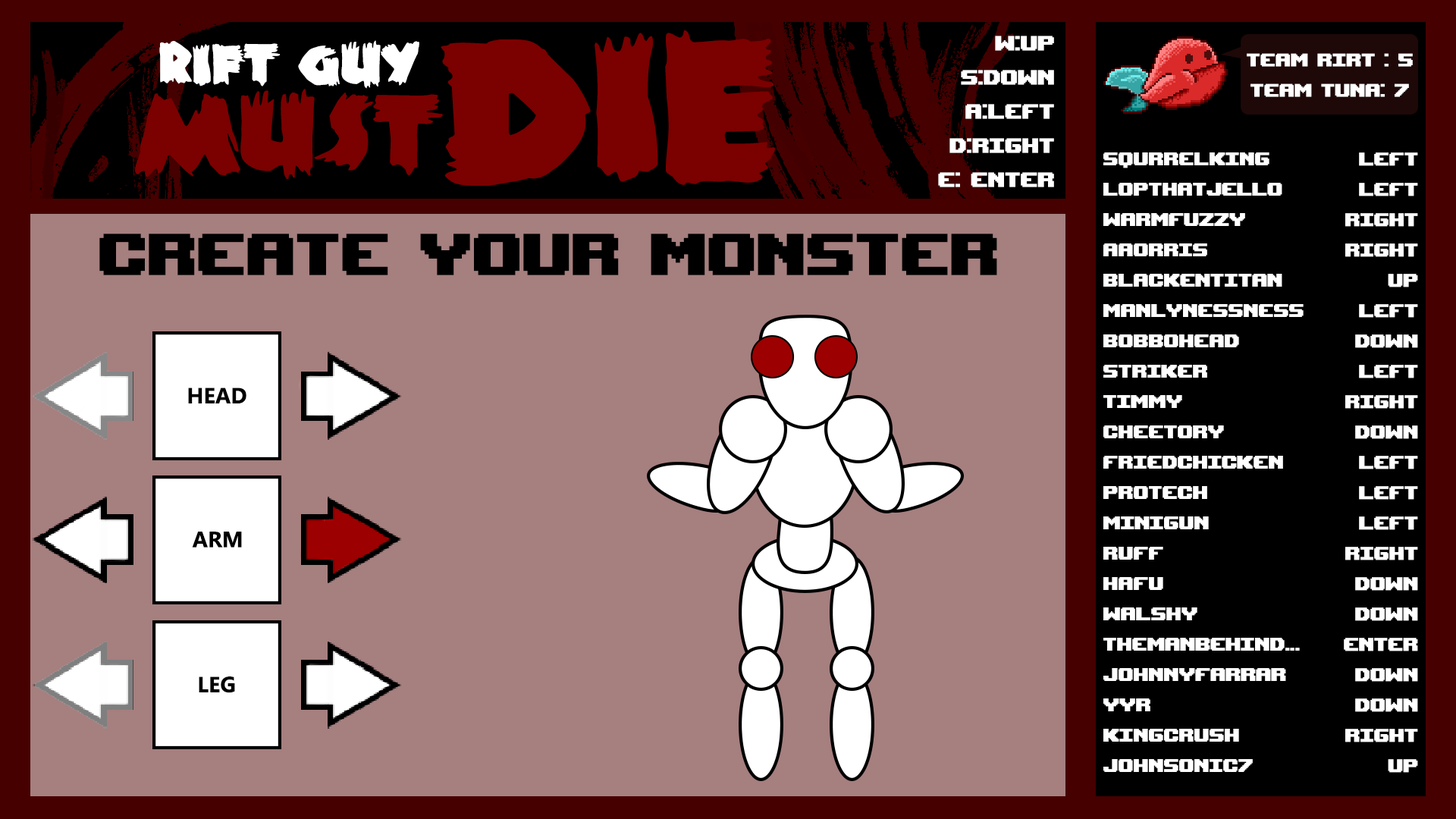
<style>
.page{position:relative;width:1456px;height:819px;background:#a67f7f}
.page>*{position:absolute;margin:0}
.t1{font:66.4px "ZombieA";color:#ffffff}
.t2{font:237px "ZombieA";color:#7b0000}
.t3{font:28.4px "UpheavalTT-BRK-";color:#ffffff}
.t4{font:25.3px "UpheavalTT-BRK-";color:#ffffff}
.t5{font:126.4px "ZombieA";color:#7b0000}
.t6{font:82.4px "UpheavalTT-BRK-";color:#000000}
.t7{font:22px "Ebrima-Bold";color:#000000}
</style>
<div class="page">
<p class="t1" style="left:159px;top:40px;width:260px;height:49px">Rift Guy</p>
<p class="t2" style="left:441px;top:30px;width:335px;height:156px">DIE</p>
<p class="t3" style="left:938px;top:36px;width:116px;height:151px;text-align:right">W:UP<br>S:DOWN<br>A:LEFT<br>D:RIGHT<br>E: ENTER</p>
<p class="t4" style="left:1247px;top:53px;width:166px;height:44px;text-align:center">Team RIRT : 5<br>TEAM TUNA: 7</p>
<p class="t5" style="left:135px;top:89px;width:308px;height:90px">MUST</p>
<p class="t4" style="left:1103px;top:152px;width:201px;height:620px">SqurrelKing<br>lopthatjello<br>warmfuzzy<br>aaorris<br>blackentitan<br>manlynessness<br>bobbohead<br>striker<br>timmy<br>cheetory<br>friedchicken<br>protech<br>minigun<br>ruff<br>hafu<br>walshy<br>themanbehind...<br>johnnyfarrar<br>yyr<br>kingcrush<br>johnsonic7</p>
<p class="t4" style="left:1344px;top:152px;width:74px;height:621px;text-align:right">left<br>left<br>right<br>right<br>up<br>left<br>down<br>left<br>right<br>down<br>left<br>left<br>left<br>right<br>down<br>down<br>enter<br>Down<br>Down<br>Right<br>Up</p>
<p class="t6" style="left:99px;top:234px;width:898px;height:41px">Create Your Monster</p>
<p class="t7" style="left:188px;top:388px;width:58px;height:15px">HEAD</p>
<p class="t7" style="left:192px;top:532px;width:50px;height:16px">ARM</p>
<p class="t7" style="left:199px;top:676px;width:36px;height:17px">LEG</p>
</div>
